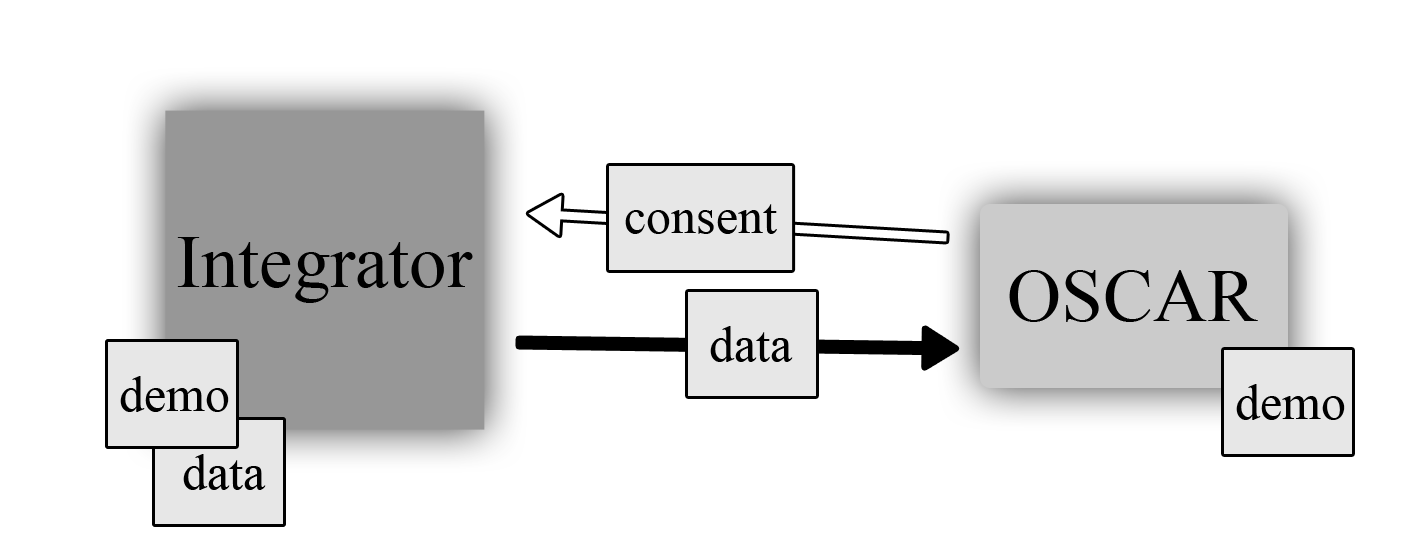
<style>
.page{position:relative;width:1402px;height:546px;background:#ffffff}
.page>*{position:absolute;margin:0}
.t1{font:50px "TimesNewRomanPSMT";color:#000000}
.t2{font:75px "TimesNewRomanPSMT";color:#000000}
</style>
<div class="page">
<p class="t1" style="left:625px;top:204px;width:152px;height:30px">consent</p>
<p class="t2" style="left:177px;top:237px;width:296px;height:66px">Integrator</p>
<p class="t2" style="left:1009px;top:270px;width:249px;height:52px">OSCAR</p>
<p class="t1" style="left:710px;top:326px;width:83px;height:36px">data</p>
<p class="t1" style="left:120px;top:376px;width:109px;height:36px">demo</p>
<p class="t1" style="left:120px;top:376px;width:109px;height:36px">demo</p>
<p class="t1" style="left:1236px;top:384px;width:109px;height:36px">demo</p>
<p class="t1" style="left:183px;top:454px;width:83px;height:36px">data</p>
<p class="t1" style="left:183px;top:454px;width:83px;height:36px">data</p>
</div>
